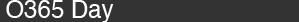
<style>
.page{position:relative;width:299px;height:22px;background:#333333}
.page>*{position:absolute;margin:0}
.t1{font:24px "Helvetica";color:#ffffff}
</style>
<div class="page">
<p class="t1" style="left:6px;top:0px;width:108px;height:23px">O365 Day</p>
</div>
